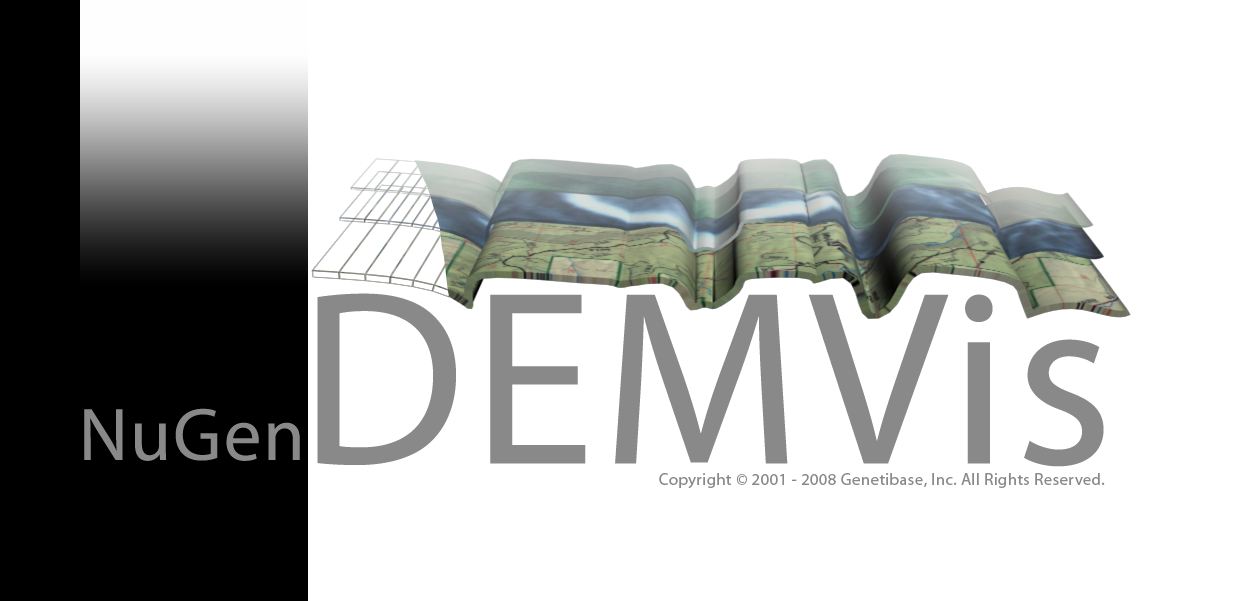
<style>
.page{position:relative;width:1236px;height:601px;background:#ffffff}
.page>*{position:absolute;margin:0}
.t1{font:250px "MyriadPro-Regular";letter-spacing:0.025em;color:#898989}
.t2{font:75px "MyriadPro-Regular";letter-spacing:0.025em;color:#898989}
.t3{font:16.7px "MyriadPro-Regular";letter-spacing:0.025em;color:#898989}
</style>
<div class="page">
<p class="t1" style="left:317px;top:293px;width:787px;height:174px">DEMVis</p>
<p class="t2" style="left:84px;top:408px;width:216px;height:53px">NuGen</p>
<p class="t3" style="left:659px;top:473px;width:446px;height:16px">Copyright © 2001 - 2008 Genetibase, Inc. All Rights Reserved.</p>
</div>
